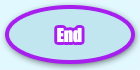
<style>
.page{position:relative;width:140px;height:70px;background:#c1e6ef}
.page>*{position:absolute;margin:0}
.t1{font:17.5px "Impact";color:#ffffff}
</style>
<div class="page">
<p class="t1" style="left:57px;top:28px;width:25px;height:15px">End</p>
</div>
